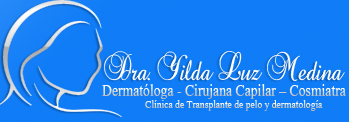
<style>
.page{position:relative;width:349px;height:122px}
.page>*{position:absolute;margin:0}
.t1{font:18.2px "BaroqueScript";color:#ffffff;scale:0.85 1}
.t2{font:20px "Aparajita";scale:0.85 1}
.t3{font:14px "Aparajita";scale:0.85 1}
</style>
<div class="page">
<p class="t1" style="left:104px;top:51px;width:241px;height:30px">Dra. Yilda Luz Medina</p>
<p class="t2" style="left:102px;top:84px;width:244px;height:15px">Dermatóloga - Cirujana Capilar – Cosmiatra</p>
<p class="t3" style="left:145px;top:100px;width:178px;height:11px">Clínica de Transplante de pelo y dermatología</p>
</div>
